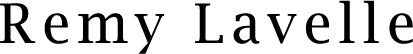
<style>
.page{position:relative;width:413px;height:54px;background:#ffffff}
.page>*{position:absolute;margin:0}
.t1{font:54.6px "LucidaBright";letter-spacing:0.135em;color:#000000}
</style>
<div class="page">
<p class="t1" style="left:0px;top:0px;width:413px;height:54px">Remy Lavelle</p>
</div>
